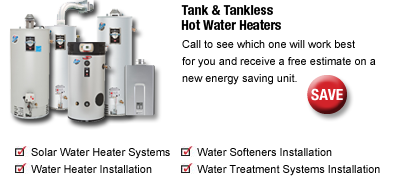
<style>
.page{position:relative;width:406px;height:196px;background:#ffffff}
.page>*{position:absolute;margin:0}
.t1{font:13.9px/15.1px "HelveticaNeueLTStd-BdCn";color:#000000}
.t2{font:11px/17px "ArialMT";color:#000000}
</style>
<div class="page">
<p class="t1" style="left:181px;top:5px;width:100px;height:25px">Tank &amp; Tankless<br>Hot Water Heaters</p>
<p class="t2" style="left:182px;top:40px;width:194px;height:45px">Call to see which one will work best<br>for you and receive a free estimate on a<br>new energy saving unit.</p>
<p class="t2" style="left:31px;top:148px;width:139px;height:25px">Solar Water Heater Systems<br>Water Heater Installation</p>
<p class="t2" style="left:197px;top:148px;width:183px;height:28px">Water Softeners Installation<br>Water Treatment Systems Installation</p>
</div>
